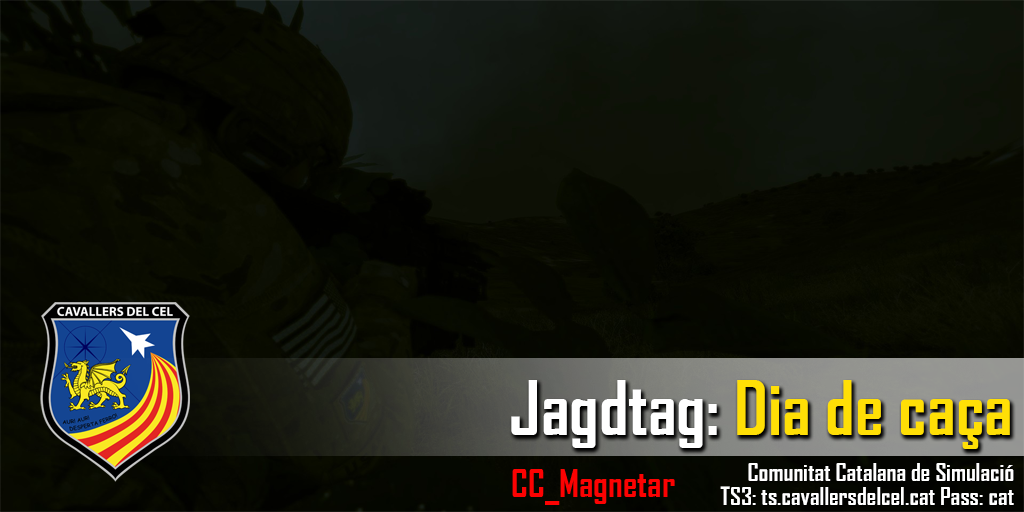
<style>
.page{position:relative;width:1024px;height:512px}
.page>*{position:absolute;margin:0}
.t1{font:72px "AgencyFB-Bold";color:#ffdf06}
.t2{font:72px "AgencyFB-Bold";color:#ffffff}
.t3{font:24px/24px "AgencyFB-Bold";color:#ffffff}
</style>
<div class="page">
<p class="t1" style="left:511px;top:380px;width:499px;height:69px"><span class="t2">Jagdtag:</span> Dia de caça</p>
<p class="t3" style="left:720px;top:463px;width:294px;height:42px;text-align:right">Comunitat Catalana de Simulació<br>TS3: ts.cavallersdelcel.cat Pass: cat</p>
</div>
